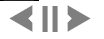
<style>
.page{position:relative;width:104px;height:39px;background:#ffffff}
.page>*{position:absolute;margin:0}
.t1{font:35.6px "Arial-BoldMT";color:#7f7f7f}
</style>
<div class="page">
<p class="t1" style="left:42px;top:6px;width:16px;height:26px">II</p>
</div>
